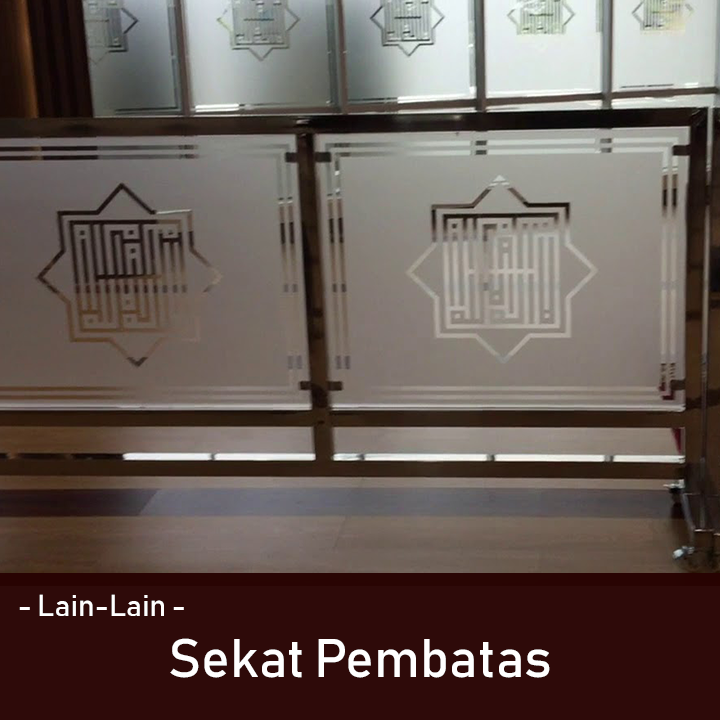
<style>
.page{position:relative;width:720px;height:720px}
.page>*{position:absolute;margin:0}
.t1{font:30px "Bahnschrift";color:#ffffff}
.t2{font:53.6px "Bahnschrift";color:#ffffff}
</style>
<div class="page">
<p class="t1" style="left:19px;top:594px;width:165px;height:22px">- Lain-Lain -</p>
<p class="t2" style="left:170px;top:638px;width:380px;height:40px">Sekat Pembatas</p>
</div>
